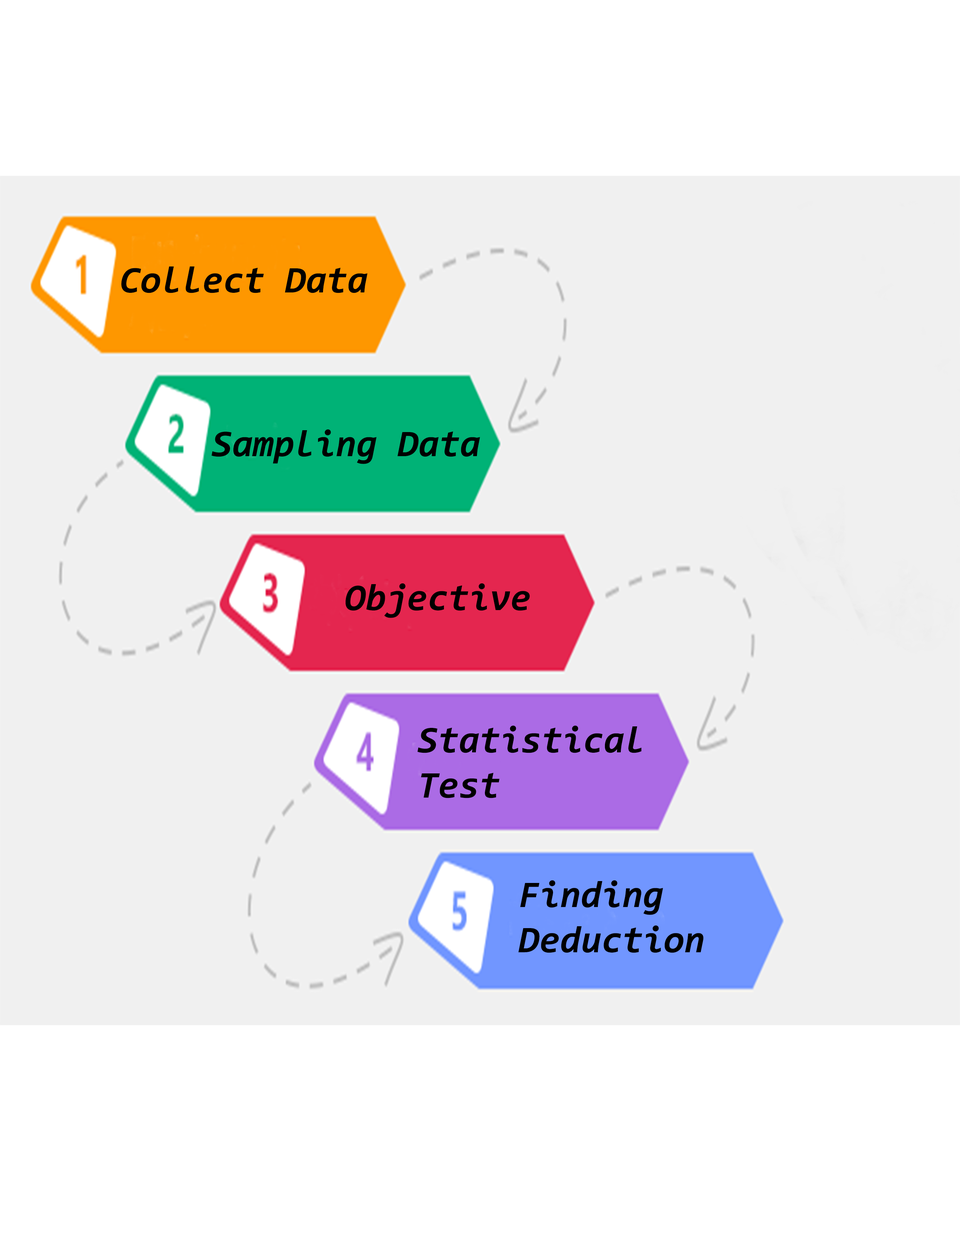
<style>
.page{position:relative;width:960px;height:1242px;background:#f0f0f0}
.page>*{position:absolute;margin:0}
.t1{font:37.6px "Consolas-BoldItalic";color:#000000}
</style>
<div class="page">
<p class="t1" style="left:121px;top:267px;width:246px;height:26px">Collect Data</p>
<p class="t1" style="left:212px;top:430px;width:268px;height:34px">Sampling Data</p>
<p class="t1" style="left:346px;top:583px;width:184px;height:35px">Objective</p>
<p class="t1" style="left:417px;top:726px;width:224px;height:72px">Statistical <br>Test</p>
<p class="t1" style="left:518px;top:880px;width:186px;height:73px">Finding <br>Deduction</p>
</div>
